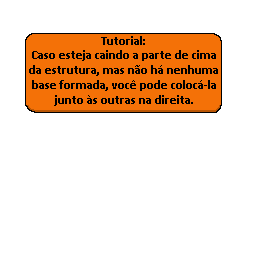
<style>
.page{position:relative;width:256px;height:256px;background:#ffffff}
.page>*{position:absolute;margin:0}
.t1{font:12.5px "Calibri-Bold";color:#000000}
</style>
<div class="page">
<p class="t1" style="left:101px;top:36px;width:44px;height:9px">Tutorial:</p>
<p class="t1" style="left:29px;top:50px;width:189px;height:56px;text-align:center">Caso esteja caindo a parte de cima da estrutura, mas não há nenhuma base formada, você pode colocá-la junto às outras na direita.</p>
</div>
